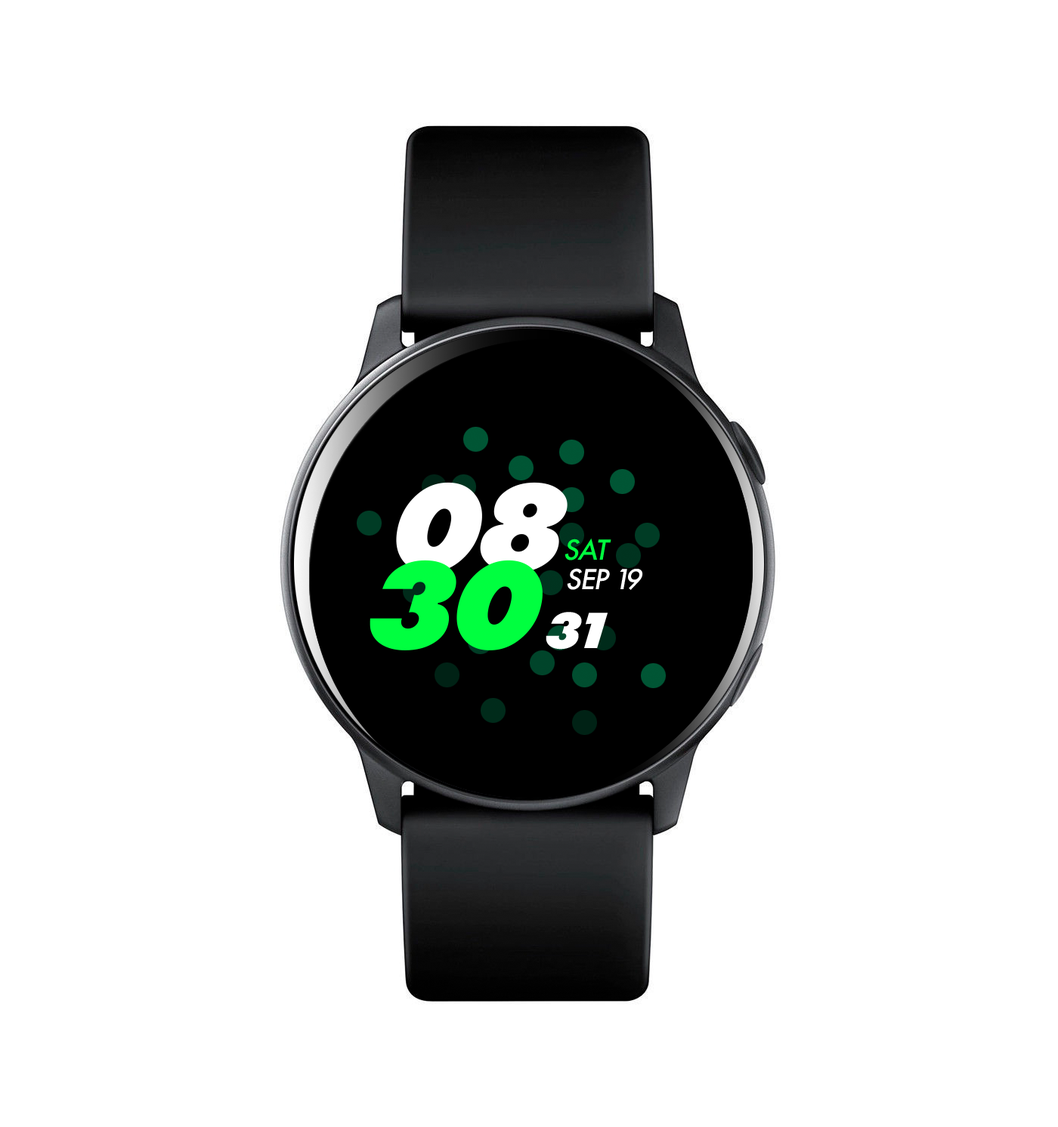
<style>
.page{position:relative;width:1058px;height:1127px;background:#ffffff}
.page>*{position:absolute;margin:0}
.t1{font:128.4px "FuturaPT-ExtraBoldObl";letter-spacing:-0.04em;color:#ffffff;text-transform:uppercase;font-style:italic}
.t2{font:30.2px "FuturaPT-Medium";letter-spacing:-0.04em;color:#00ff3f;text-transform:uppercase;font-style:italic}
.t3{font:128.4px "FuturaPT-ExtraBoldObl";letter-spacing:-0.04em;color:#00ff3f;text-transform:uppercase;font-style:italic}
.t4{font:30.2px "FuturaPT-Medium";letter-spacing:-0.04em;color:#ffffff;text-transform:uppercase;font-style:italic}
.t5{font:52.9px "FuturaPT-ExtraBoldObl";letter-spacing:-0.04em;color:#ffffff;text-transform:uppercase;font-style:italic}
</style>
<div class="page">
<p class="t1" style="left:396px;top:482px;width:171px;height:91px">08</p>
<p class="t2" style="left:564px;top:538px;width:47px;height:23px">Sat</p>
<p class="t3" style="left:369px;top:560px;width:173px;height:91px">30</p>
<p class="t4" style="left:567px;top:568px;width:76px;height:22px">SEP 19</p>
<p class="t5" style="left:546px;top:612px;width:61px;height:38px">31</p>
</div>
